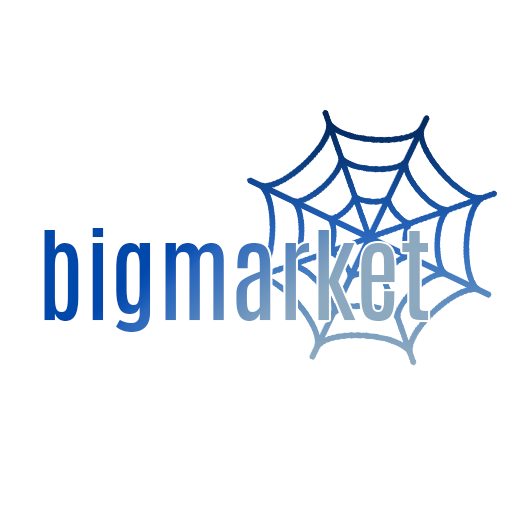
<style>
.page{position:relative;width:512px;height:512px;background:#ffffff}
.page>*{position:absolute;margin:0}
.t1{font:104.2px "Antonio-Regular"}
</style>
<div class="page">
<p class="t1" style="left:44px;top:228px;width:385px;height:104px">bigmarket</p>
</div>
